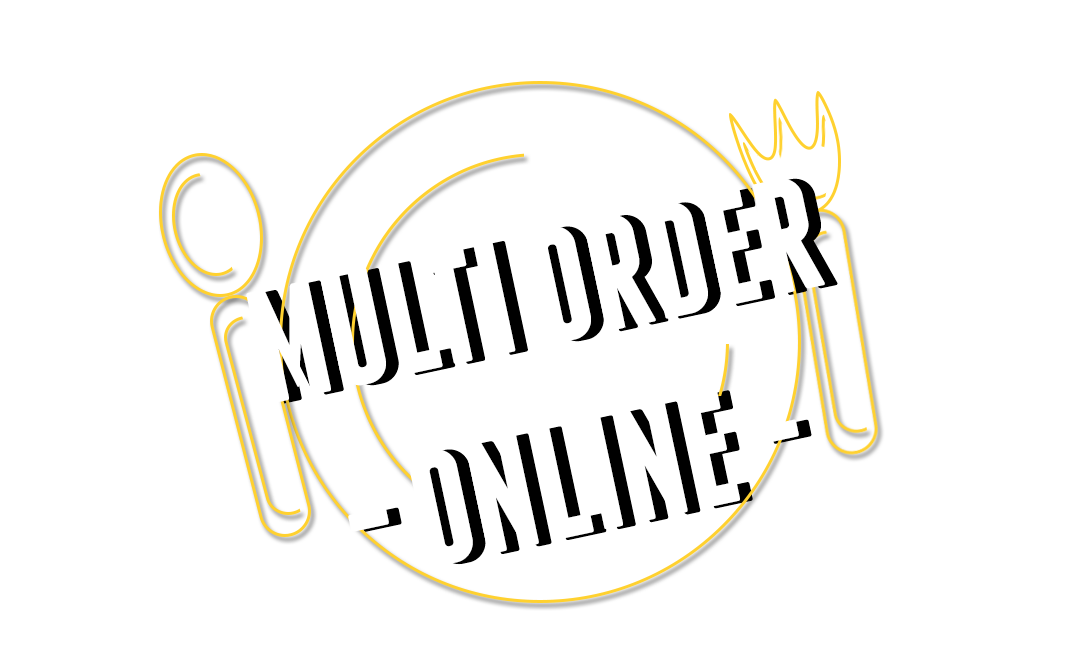
<style>
.page{position:relative;width:1080px;height:660px;background:#ffffff}
.page>*{position:absolute;margin:0}
.t1{font:160.9px "Franchise-Bold"}
</style>
<div class="page">
<p class="t1" style="left:259px;top:178px;width:579px;height:387px;text-align:center;rotate:-12deg">MULTI ORDER<br>- ONLINE -</p>
</div>
